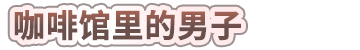
<style>
.page{position:relative;width:360px;height:50px;background:#ffffff}
.page>*{position:absolute;margin:0}
.t1{font:32px "SourceHanSansSC-Bold";font-weight:bold}
</style>
<div class="page">
<p class="t1" style="left:14px;top:9px;width:227px;height:32px">咖啡馆里的男子</p>
</div>
